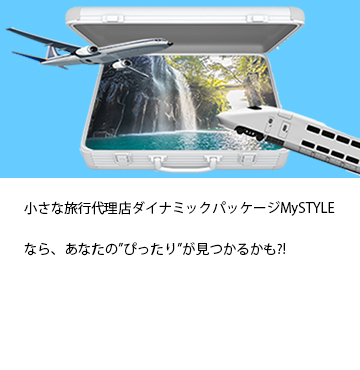
<style>
.page{position:relative;width:360px;height:370px;background:#ffffff}
.page>*{position:absolute;margin:0}
.t1{font:13.3px/41.7px "KozGoPr6N-Regular";letter-spacing:0.01em;color:#000000}
</style>
<div class="page">
<p class="t1" style="left:24px;top:201px;width:311px;height:55px">小さな旅行代理店ダイナミックパッケージMySTYLEなら、あなたの”ぴったり”が見つかるかも?!</p>
</div>
